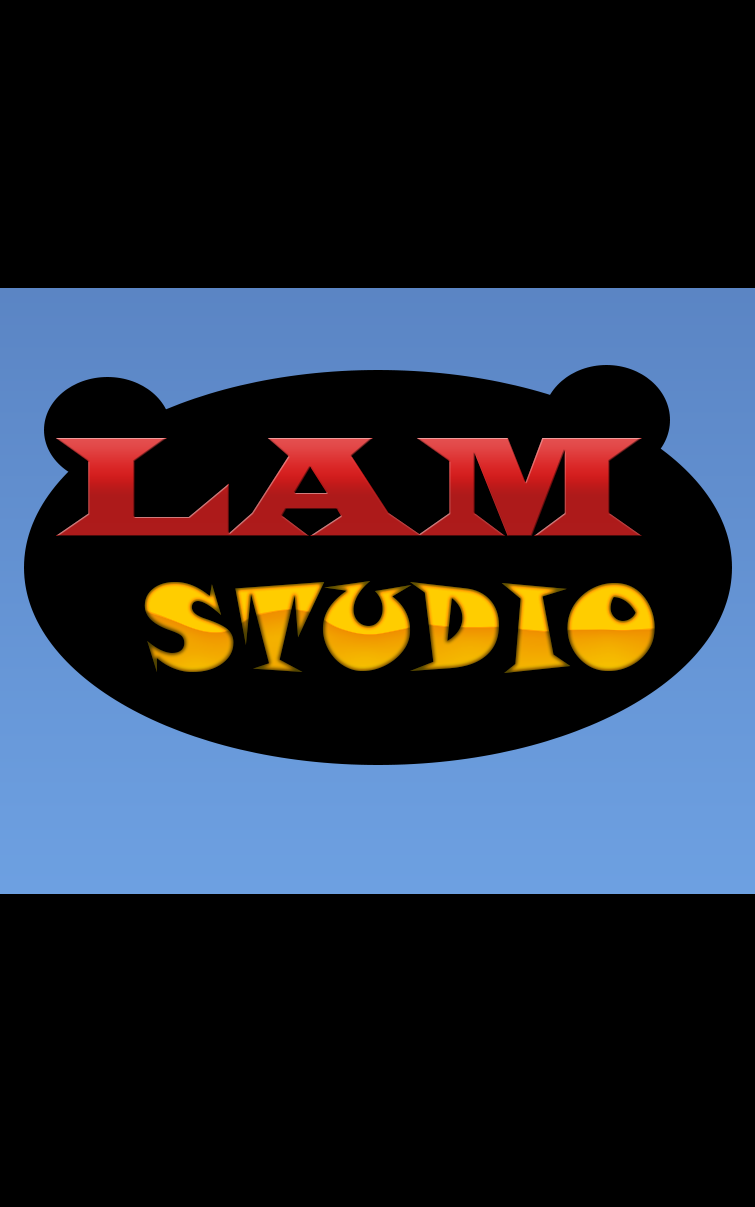
<style>
.page{position:relative;width:755px;height:1207px;background:#000000}
.page>*{position:absolute;margin:0}
.t1{font:147.1px "LatinWide";letter-spacing:0.02em;scale:0.9 1}
.t2{font:119.2px "SnapITC-Regular";letter-spacing:0.02em;scale:0.93 1}
</style>
<div class="page">
<p class="t1" style="left:55px;top:438px;width:587px;height:98px">LAM</p>
<p class="t2" style="left:144px;top:581px;width:511px;height:92px">STUDIO</p>
</div>
